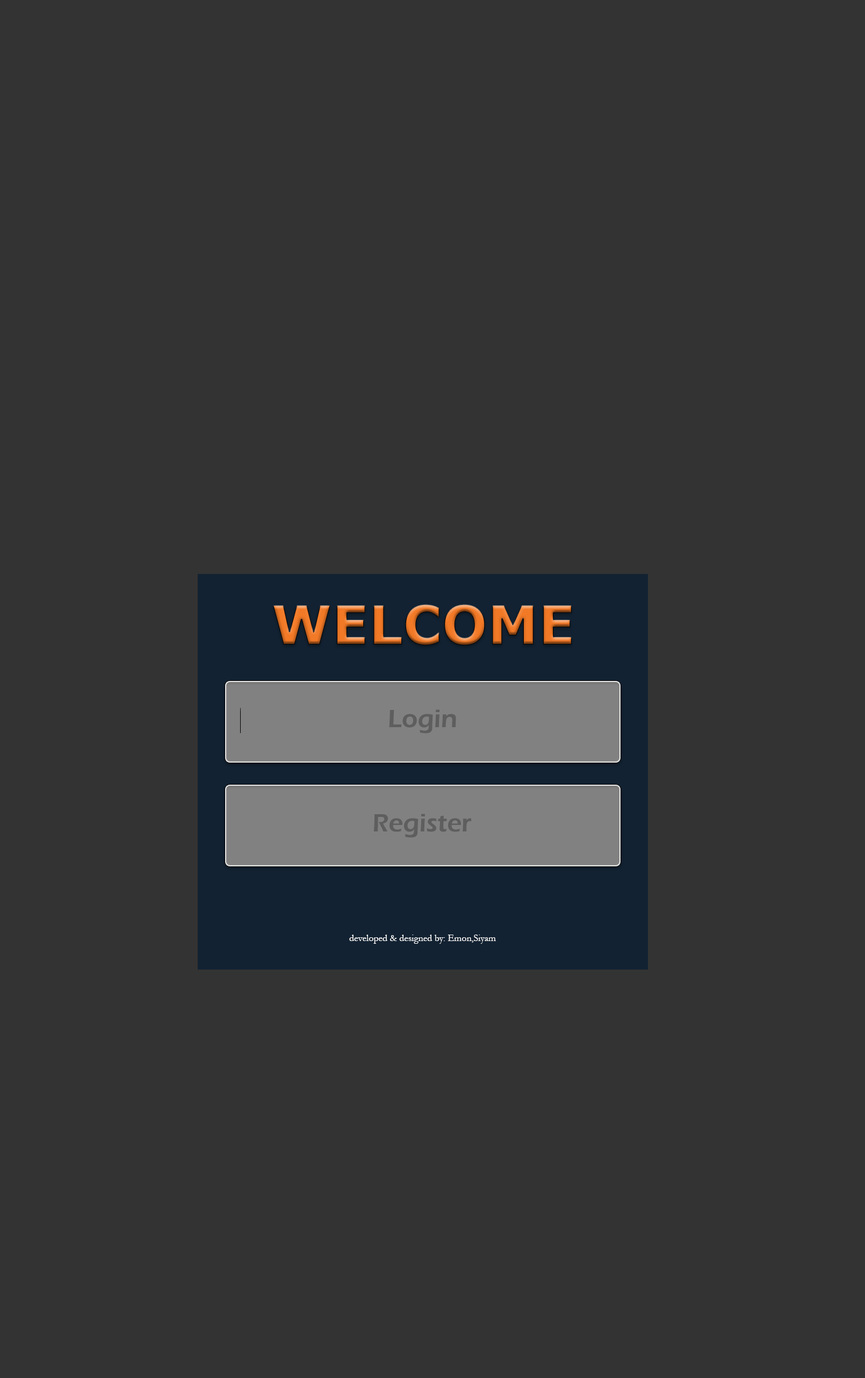
<style>
.page{position:relative;width:865px;height:1378px;background:#333333}
.page>*{position:absolute;margin:0}
.t1{font:53.7px "Verdana-Bold"}
.t2{font:25.8px "ErasITC-Demi";color:#5e5e5e}
.t3{font:9.7px "Garamond";color:#ffffff}
</style>
<div class="page">
<p class="t1" style="left:273px;top:604px;width:299px;height:41px">WELCOME</p>
<p class="t2" style="left:389px;top:709px;width:67px;height:25px">Login</p>
<p class="t2" style="left:374px;top:814px;width:98px;height:24px">Register</p>
<p class="t3" style="left:349px;top:935px;width:147px;height:9px">developed &amp; designed by: Emon,Siyam</p>
</div>
